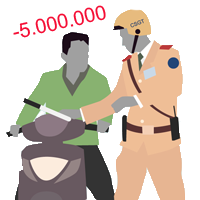
<style>
.page{position:relative;width:200px;height:200px;background:#ffffff}
.page>*{position:absolute;margin:0}
.t1{font:20px "ArialMT";color:#f50d34}
</style>
<div class="page">
<p class="t1" style="left:13px;top:5px;width:93px;height:33px;rotate:-13deg">-5.000.000</p>
</div>
